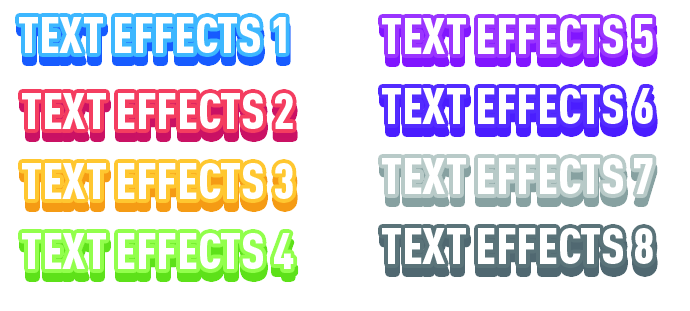
<style>
.page{position:relative;width:690px;height:311px;background:#ffffff}
.page>*{position:absolute;margin:0}
.t1{font:50px "DINPro-CondensedBlack";color:#ffffff}
.t2{font:50px "DINPro-CondensedBlack";color:#165bff}
.t3{font:50px "DINPro-CondensedBlack";color:#b00e57}
</style>
<div class="page">
<p class="t1" style="left:19px;top:17px;width:267px;height:36px">TEXT EFFECTS 1</p>
<p class="t2" style="left:20px;top:26px;width:267px;height:36px">TEXT EFFECTS 1</p>
<p class="t1" style="left:382px;top:18px;width:271px;height:36px">TEXT EFFECTS 5</p>
<p class="t1" style="left:382px;top:88px;width:271px;height:36px">TEXT EFFECTS 6</p>
<p class="t1" style="left:22px;top:93px;width:271px;height:36px">TEXT EFFECTS 2</p>
<p class="t3" style="left:23px;top:102px;width:271px;height:36px">TEXT EFFECTS 2</p>
<p class="t1" style="left:382px;top:158px;width:271px;height:36px">TEXT EFFECTS 7</p>
<p class="t1" style="left:22px;top:163px;width:271px;height:36px">TEXT EFFECTS 3</p>
<p class="t1" style="left:22px;top:233px;width:272px;height:36px">TEXT EFFECTS 4</p>
<p class="t1" style="left:382px;top:228px;width:271px;height:36px">TEXT EFFECTS 8</p>
</div>
